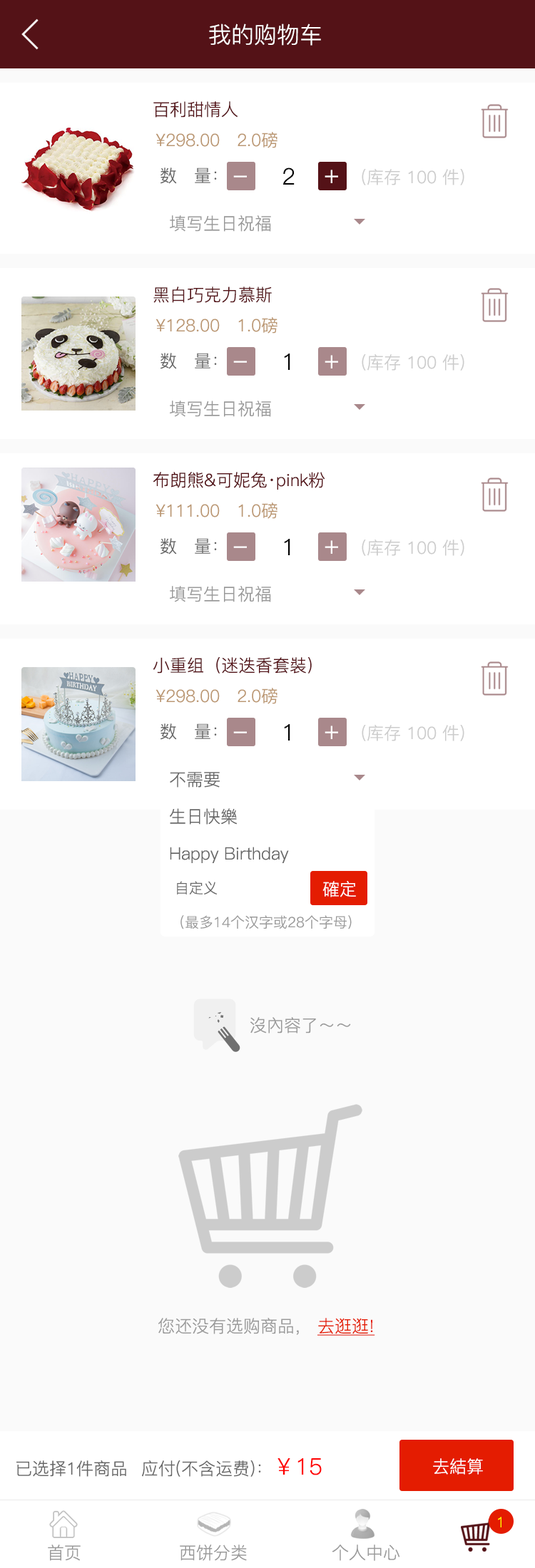
<style>
.page{position:relative;width:535px;height:1568px;background:#ffffff}
.page>*{position:absolute;margin:0}
.t1{font:22.8px "PingFang-SC-Regular";color:#ffffff}
.t2{font:17.1px "PingFang-SC-Regular";color:#541217}
.t3{font:17.1px "PingFang-SC-Regular";color:#bb9772}
.t4{font:17.1px "PingFang-SC-Regular";color:#666666}
.t5{font:22.8px "PingFang-SC-Regular";color:#000000}
.t6{font:25.7px "PingFang-SC-Regular";color:#ffffff}
.t7{font:17.1px "PingFang-SC-Regular";color:#cccccc}
.t8{font:17.1px "PingFang-SC-Regular";color:#999999}
.t9{font:14.3px "PingFang-SC-Regular";color:#666666}
.t10{font:17.1px "PingFang-SC-Regular";color:#ffffff}
.t11{font:14.3px "PingFang-SC-Regular";color:#999999}
.t12{font:17.1px "PingFang-SC-Regular";color:#e41c01;text-decoration:underline}
.t13{font:22.8px "PingFang-SC-Regular";color:#ff0000}
.t14{font:14.3px "PingFang-SC-Regular";color:#ffff00}
</style>
<div class="page">
<p class="t1" style="left:209px;top:24px;width:112px;height:22px">我的购物车</p>
<p class="t2" style="left:153px;top:101px;width:85px;height:17px">百利甜情人</p>
<p class="t3" style="left:155px;top:132px;width:122px;height:16px">¥298.00   2.0磅</p>
<p class="t4" style="left:160px;top:167px;width:57px;height:17px">数   量：</p>
<p class="t5" style="left:283px;top:167px;width:11px;height:18px">2</p>
<p class="t6" style="left:324px;top:170px;width:14px;height:13px">+</p>
<p class="t7" style="left:361px;top:169px;width:103px;height:16px">(库存 100 件)</p>
<p class="t6" style="left:233px;top:175px;width:14px;height:2px">-</p>
<p class="t8" style="left:170px;top:215px;width:101px;height:17px">填写生日祝福</p>
<p class="t2" style="left:153px;top:287px;width:119px;height:16px">黑白巧克力慕斯</p>
<p class="t3" style="left:155px;top:317px;width:122px;height:17px">¥128.00   1.0磅</p>
<p class="t4" style="left:160px;top:353px;width:57px;height:16px">数   量：</p>
<p class="t5" style="left:284px;top:354px;width:6px;height:16px">1</p>
<p class="t6" style="left:233px;top:361px;width:14px;height:2px">-</p>
<p class="t6" style="left:324px;top:355px;width:14px;height:13px">+</p>
<p class="t7" style="left:361px;top:354px;width:103px;height:17px">(库存 100 件)</p>
<p class="t8" style="left:170px;top:401px;width:101px;height:16px">填写生日祝福</p>
<p class="t2" style="left:153px;top:472px;width:172px;height:18px">布朗熊&amp;可妮兔·pink粉</p>
<p class="t3" style="left:155px;top:502px;width:122px;height:17px">¥111.00   1.0磅</p>
<p class="t4" style="left:160px;top:538px;width:57px;height:17px">数   量：</p>
<p class="t6" style="left:233px;top:546px;width:14px;height:2px">-</p>
<p class="t5" style="left:284px;top:539px;width:6px;height:16px">1</p>
<p class="t6" style="left:324px;top:540px;width:14px;height:14px">+</p>
<p class="t7" style="left:361px;top:540px;width:103px;height:16px">(库存 100 件)</p>
<p class="t8" style="left:170px;top:586px;width:101px;height:16px">填写生日祝福</p>
<p class="t2" style="left:153px;top:657px;width:158px;height:17px">小重组（迷迭香套裝）</p>
<p class="t3" style="left:155px;top:688px;width:122px;height:16px">¥298.00   2.0磅</p>
<p class="t4" style="left:160px;top:723px;width:57px;height:17px">数   量：</p>
<p class="t5" style="left:284px;top:724px;width:6px;height:17px">1</p>
<p class="t6" style="left:324px;top:726px;width:14px;height:13px">+</p>
<p class="t7" style="left:361px;top:725px;width:103px;height:16px">(库存 100 件)</p>
<p class="t6" style="left:233px;top:731px;width:14px;height:2px">-</p>
<p class="t4" style="left:170px;top:772px;width:50px;height:16px">不需要</p>
<p class="t4" style="left:170px;top:808px;width:67px;height:17px">生日快樂</p>
<p class="t4" style="left:170px;top:847px;width:119px;height:16px">Happy Birthday</p>
<p class="t9" style="left:177px;top:881px;width:40px;height:13px">自定义</p>
<p class="t10" style="left:322px;top:881px;width:34px;height:16px">確定</p>
<p class="t11" style="left:180px;top:915px;width:171px;height:14px">(最多14个汉字或28个字母)</p>
<p class="t8" style="left:249px;top:1017px;width:102px;height:16px">沒內容了～～</p>
<p class="t8" style="left:158px;top:1318px;width:217px;height:18px">您还没有选购商品， <span class="t12">去逛逛!</span></p>
<p class="t4" style="left:16px;top:1460px;width:110px;height:17px">已选择1件商品</p>
<p class="t4" style="left:142px;top:1458px;width:179px;height:19px">应付(不含运费)：<span class="t13">￥15</span></p>
<p class="t10" style="left:433px;top:1458px;width:50px;height:17px">去結算</p>
<p class="t14" style="left:497px;top:1517px;width:4px;height:10px">1</p>
<p class="t8" style="left:48px;top:1544px;width:33px;height:17px">首页</p>
<p class="t8" style="left:180px;top:1544px;width:67px;height:17px">西饼分类</p>
<p class="t8" style="left:331px;top:1544px;width:69px;height:17px">个人中心</p>
</div>
